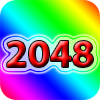
<style>
.page{position:relative;width:100px;height:100px}
.page>*{position:absolute;margin:0}
.t1{font:40px "MyriadPro-Bold"}
</style>
<div class="page">
<p class="t1" style="left:7px;top:41px;width:86px;height:26px">2048</p>
</div>
